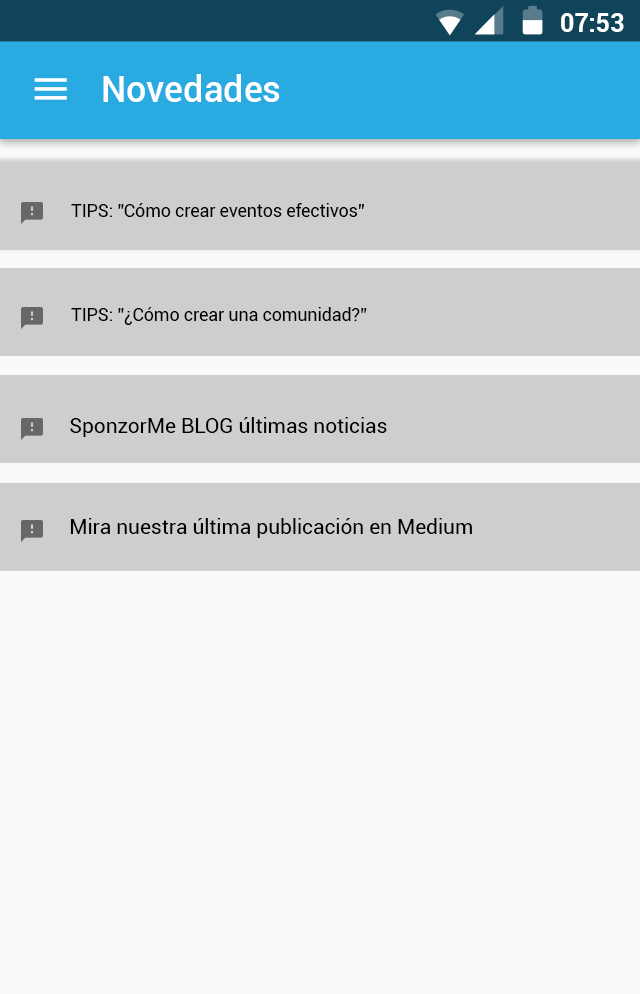
<style>
.page{position:relative;width:640px;height:994px;background:#fafafa}
.page>*{position:absolute;margin:0}
.t1{font:24.9px "Roboto-Bold";color:#ffffff}
.t2{font:35.8px "Roboto-Medium";letter-spacing:0.005em;color:#ffffff}
.t3{font:18px "Roboto-Regular";letter-spacing:-0.01em;color:#000000}
.t4{font:21.2px "Roboto-Regular";letter-spacing:-0.01em;color:#000000}
</style>
<div class="page">
<p class="t1" style="left:561px;top:13px;width:63px;height:19px">07:53</p>
<p class="t2" style="left:103px;top:74px;width:177px;height:28px">Novedades</p>
<p class="t3" style="left:71px;top:203px;width:293px;height:14px">TIPS: ”Cómo crear eventos efectivos”</p>
<p class="t3" style="left:71px;top:307px;width:296px;height:18px">TIPS: ”¿Cómo crear una comunidad?”</p>
<p class="t4" style="left:70px;top:417px;width:317px;height:20px">SponzorMe BLOG últimas noticias</p>
<p class="t4" style="left:70px;top:518px;width:402px;height:20px">Mira nuestra última publicación en Medium</p>
</div>
